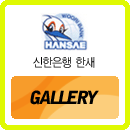
<style>
.page{position:relative;width:130px;height:130px;background:#ffffff}
.page>*{position:absolute;margin:0}
.t1{font:12px "YDIYGO120-KSCpc-EUC-H";letter-spacing:-0.1em;color:#000000;scale:0.9 1}
.t2{font:18px "BellGothicBT-Black";letter-spacing:-0.1em;color:#000000;font-style:italic}
</style>
<div class="page">
<p class="t1" style="left:33px;top:57px;width:62px;height:11px">신한은행 한새</p>
<p class="t2" style="left:30px;top:90px;width:69px;height:15px">GALLERY</p>
</div>
